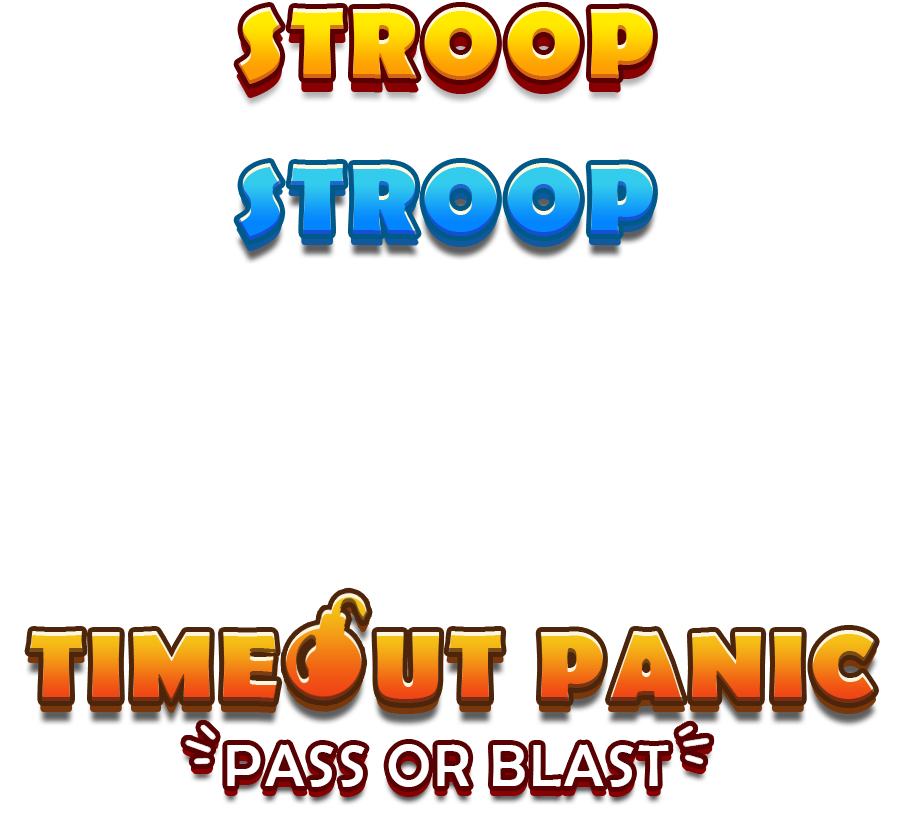
<style>
.page{position:relative;width:902px;height:823px;background:#ffffff}
.page>*{position:absolute;margin:0}
.t1{font:100px "BerlinSansFB-Bold";letter-spacing:0.05em;text-transform:uppercase}
.t2{font:60px "BerlinSansFB-Reg";letter-spacing:0.05em;color:#ffffff;text-transform:uppercase}
</style>
<div class="page">
<p class="t1" style="left:238px;top:7px;width:415px;height:77px">stroop</p>
<p class="t1" style="left:238px;top:163px;width:415px;height:77px">stroop</p>
<p class="t1" style="left:29px;top:630px;width:846px;height:73px">Time   ut Panic</p>
<p class="t2" style="left:227px;top:744px;width:442px;height:43px">PASS OR BLAST</p>
</div>
